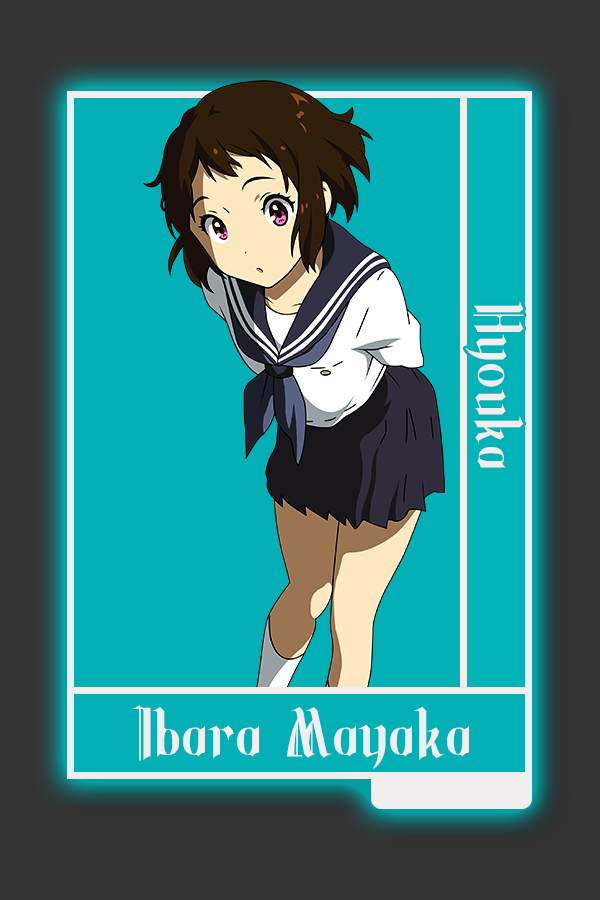
<style>
.page{position:relative;width:600px;height:900px;background:#02b0b6}
.page>*{position:absolute;margin:0}
.t1{font:70.1px "Hangyaku";color:#f0eeef}
.t2{font:75px "Hangyaku";color:#f0eeef}
</style>
<div class="page">
<p class="t1" style="left:465px;top:301px;width:59px;height:167px;rotate:90deg">Hyouka</p>
<p class="t2" style="left:132px;top:705px;width:337px;height:64px">Ibara Mayaka</p>
</div>
